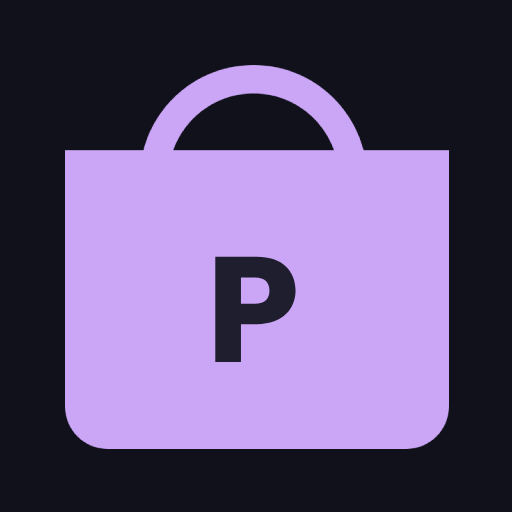
<style>
.page{position:relative;width:512px;height:512px;background:#11111b}
.page>*{position:absolute;margin:0}
.t1{font:150px "Poppins-Bold";color:#1e1e2e}
</style>
<div class="page">
<p class="t1" style="left:215px;top:256px;width:81px;height:106px">P</p>
</div>
